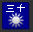
<style>
.page{position:relative;width:33px;height:32px;background:#000090}
.page>*{position:absolute;margin:0}
.t1{font:10.4px "SimSun";color:#ffffff}
</style>
<div class="page">
<p class="t1" style="left:6px;top:4px;width:19px;height:8px">三十</p>
</div>
